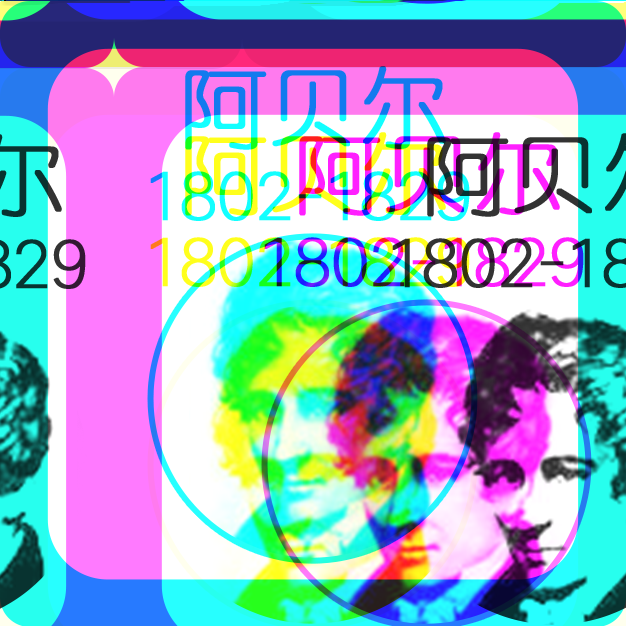
<style>
.page{position:relative;width:626px;height:626px}
.page>*{position:absolute;margin:0}
.t1{font:87.8px "YouYuan";font-weight:bold}
.t2{font:63.8px "MI-LANTING--GBK1-Light";font-weight:bold}
</style>
<div class="page">
<p class="t1" style="left:185px;top:65px;width:261px;height:84px">阿贝尔</p>
<p class="t2" style="left:150px;top:170px;width:320px;height:50px">1802-1829</p>
</div>
